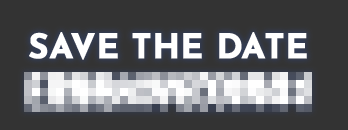
<style>
.page{position:relative;width:348px;height:130px;background:#333333}
.page>*{position:absolute;margin:0}
.t1{font:34px "JosefinSans-Bold";color:#ffffff;font-weight:bold}
</style>
<div class="page">
<p class="t1" style="left:29px;top:32px;width:278px;height:28px">SAVE THE DATE</p>
</div>
